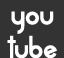
<style>
.page{position:relative;width:64px;height:58px;background:#333333}
.page>*{position:absolute;margin:0}
.t1{font:28px "AlpacaScarlettDemo";color:#ffffff}
</style>
<div class="page">
<p class="t1" style="left:7px;top:11px;width:50px;height:48px;text-align:center">you<br>tube</p>
</div>
